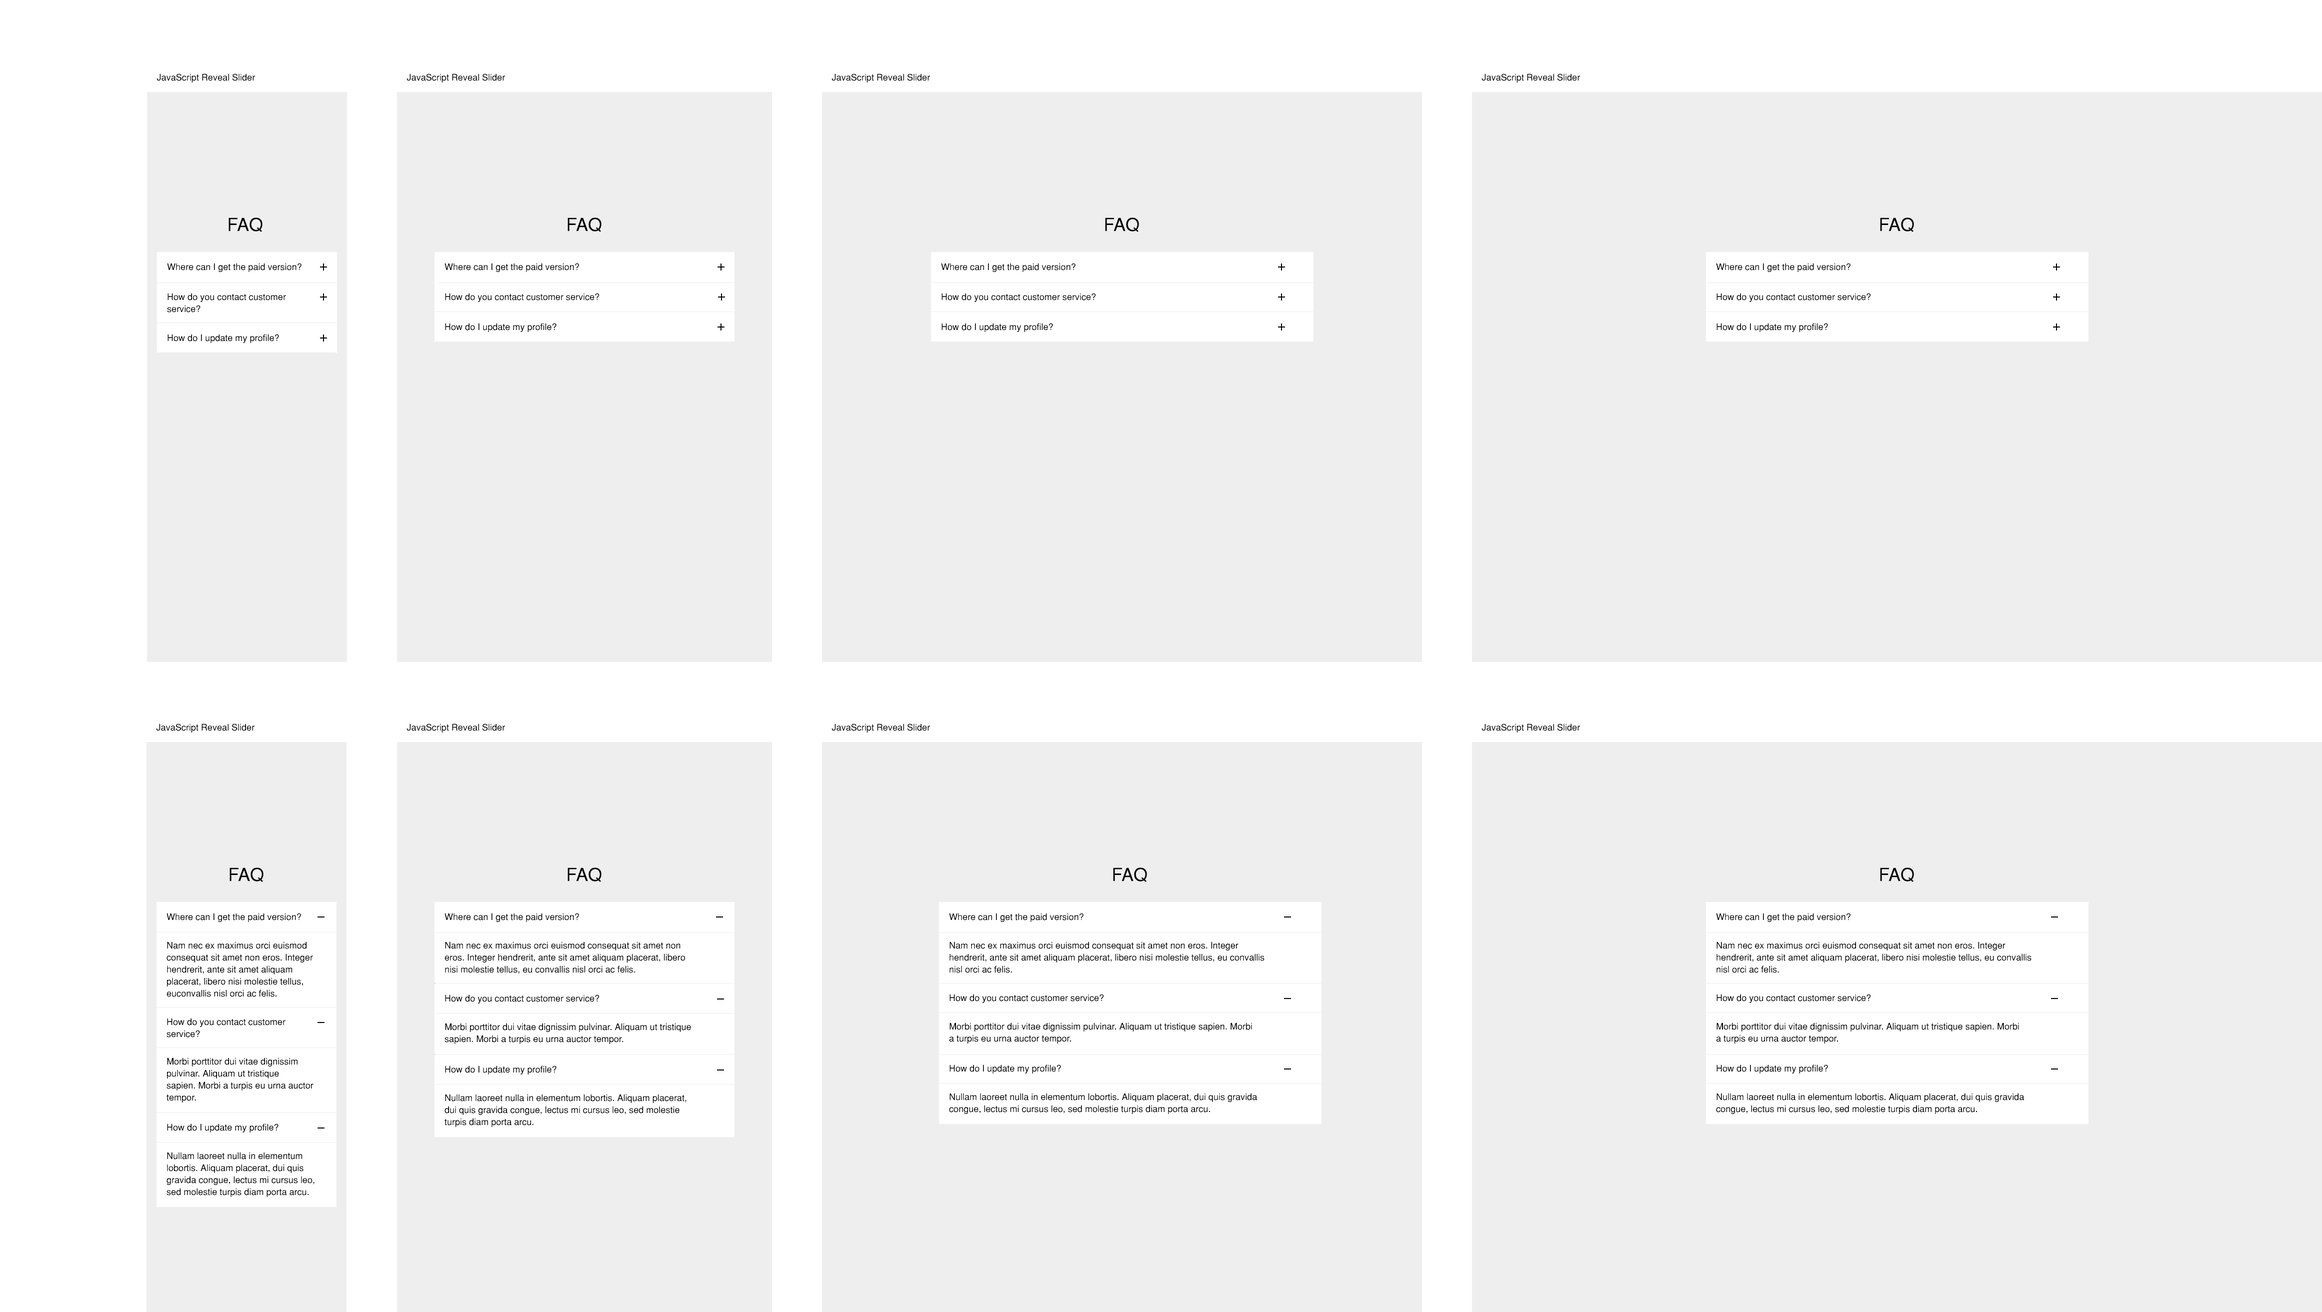
<style>
.page{position:relative;width:2322px;height:1312px;background:#eeeeee}
.page>*{position:absolute;margin:0}
.t1{font:9px "Helvetica-Normal";color:#000000}
.t2{font:18px "Helvetica-Normal";color:#000000}
.t3{font:9px/12px "Helvetica-Normal";color:#000000}
</style>
<div class="page">
<p class="t1" style="left:156px;top:74px;width:99px;height:8px">JavaScript Reveal Slider</p>
<p class="t1" style="left:406px;top:74px;width:99px;height:8px">JavaScript Reveal Slider</p>
<p class="t1" style="left:832px;top:74px;width:98px;height:8px">JavaScript Reveal Slider</p>
<p class="t1" style="left:1482px;top:74px;width:98px;height:8px">JavaScript Reveal Slider</p>
<p class="t2" style="left:228px;top:218px;width:34px;height:14px">FAQ</p>
<p class="t2" style="left:568px;top:218px;width:34px;height:14px">FAQ</p>
<p class="t2" style="left:1105px;top:218px;width:34px;height:14px">FAQ</p>
<p class="t2" style="left:1880px;top:218px;width:34px;height:14px">FAQ</p>
<p class="t1" style="left:167px;top:263px;width:135px;height:9px">Where can I get the paid version?</p>
<p class="t1" style="left:444px;top:263px;width:135px;height:9px">Where can I get the paid version?</p>
<p class="t1" style="left:941px;top:263px;width:135px;height:9px">Where can I get the paid version?</p>
<p class="t1" style="left:1716px;top:263px;width:134px;height:9px">Where can I get the paid version?</p>
<p class="t3" style="left:167px;top:293px;width:119px;height:19px">How do you contact customer <br>service?</p>
<p class="t1" style="left:445px;top:293px;width:155px;height:9px">How do you contact customer service?</p>
<p class="t1" style="left:942px;top:293px;width:154px;height:9px">How do you contact customer service?</p>
<p class="t1" style="left:1716px;top:293px;width:155px;height:9px">How do you contact customer service?</p>
<p class="t1" style="left:445px;top:323px;width:111px;height:9px">How do I update my profile?</p>
<p class="t1" style="left:942px;top:323px;width:111px;height:9px">How do I update my profile?</p>
<p class="t1" style="left:1716px;top:323px;width:112px;height:9px">How do I update my profile?</p>
<p class="t1" style="left:168px;top:334px;width:111px;height:9px">How do I update my profile?</p>
<p class="t1" style="left:156px;top:724px;width:98px;height:8px">JavaScript Reveal Slider</p>
<p class="t1" style="left:406px;top:724px;width:99px;height:8px">JavaScript Reveal Slider</p>
<p class="t1" style="left:832px;top:724px;width:98px;height:8px">JavaScript Reveal Slider</p>
<p class="t1" style="left:1482px;top:724px;width:98px;height:8px">JavaScript Reveal Slider</p>
<p class="t2" style="left:230px;top:868px;width:34px;height:14px">FAQ</p>
<p class="t2" style="left:568px;top:868px;width:34px;height:14px">FAQ</p>
<p class="t2" style="left:1113px;top:868px;width:34px;height:14px">FAQ</p>
<p class="t2" style="left:1880px;top:868px;width:34px;height:14px">FAQ</p>
<p class="t1" style="left:166px;top:913px;width:135px;height:9px">Where can I get the paid version?</p>
<p class="t1" style="left:444px;top:913px;width:135px;height:9px">Where can I get the paid version?</p>
<p class="t1" style="left:949px;top:913px;width:135px;height:9px">Where can I get the paid version?</p>
<p class="t1" style="left:1716px;top:913px;width:134px;height:9px">Where can I get the paid version?</p>
<p class="t3" style="left:166px;top:942px;width:147px;height:55px">Nam nec ex maximus orci euismod<br>consequat sit amet non eros. Integer<br>hendrerit, ante sit amet aliquam<br>placerat, libero nisi molestie tellus, <br>euconvallis nisl orci ac felis.</p>
<p class="t3" style="left:444px;top:942px;width:241px;height:32px">Nam nec ex maximus orci euismod consequat sit amet non eros. Integer hendrerit, ante sit amet aliquam placerat, libero nisi molestie tellus, eu convallis nisl orci ac felis.</p>
<p class="t3" style="left:950px;top:942px;width:314px;height:31px">Nam nec ex maximus orci euismod consequat sit amet non eros. Integer<br>hendrerit, ante sit amet aliquam placerat, libero nisi molestie tellus, eu convallis<br>nisl orci ac felis.</p>
<p class="t3" style="left:1716px;top:942px;width:316px;height:31px">Nam nec ex maximus orci euismod consequat sit amet non eros. Integer<br>hendrerit, ante sit amet aliquam placerat, libero nisi molestie tellus, eu convallis<br>nisl orci ac felis.</p>
<p class="t1" style="left:445px;top:994px;width:155px;height:10px">How do you contact customer service?</p>
<p class="t1" style="left:950px;top:994px;width:154px;height:9px">How do you contact customer service?</p>
<p class="t1" style="left:1716px;top:994px;width:155px;height:9px">How do you contact customer service?</p>
<p class="t3" style="left:166px;top:1018px;width:120px;height:20px">How do you contact customer <br>service?</p>
<p class="t3" style="left:444px;top:1023px;width:247px;height:21px">Morbi porttitor dui vitae dignissim pulvinar. Aliquam ut tristique<br>sapien. Morbi a turpis eu urna auctor tempor.</p>
<p class="t3" style="left:949px;top:1022px;width:303px;height:22px">Morbi porttitor dui vitae dignissim pulvinar. Aliquam ut tristique sapien. Morbi <br>a turpis eu urna auctor tempor.</p>
<p class="t3" style="left:1716px;top:1022px;width:303px;height:22px">Morbi porttitor dui vitae dignissim pulvinar. Aliquam ut tristique sapien. Morbi <br>a turpis eu urna auctor tempor.</p>
<p class="t3" style="left:166px;top:1058px;width:148px;height:44px">Morbi porttitor dui vitae dignissim<br>pulvinar. Aliquam ut tristique<br>sapien. Morbi a turpis eu urna auctor<br>tempor.</p>
<p class="t1" style="left:445px;top:1066px;width:111px;height:8px">How do I update my profile?</p>
<p class="t1" style="left:950px;top:1064px;width:111px;height:10px">How do I update my profile?</p>
<p class="t1" style="left:1716px;top:1064px;width:112px;height:10px">How do I update my profile?</p>
<p class="t3" style="left:444px;top:1094px;width:242px;height:33px">Nullam laoreet nulla in elementum lobortis. Aliquam placerat,<br>dui quis gravida congue, lectus mi cursus leo, sed molestie<br>turpis diam porta arcu.</p>
<p class="t3" style="left:949px;top:1093px;width:308px;height:21px">Nullam laoreet nulla in elementum lobortis. Aliquam placerat, dui quis gravida <br>congue, lectus mi cursus leo, sed molestie turpis diam porta arcu.</p>
<p class="t3" style="left:1716px;top:1093px;width:308px;height:21px">Nullam laoreet nulla in elementum lobortis. Aliquam placerat, dui quis gravida <br>congue, lectus mi cursus leo, sed molestie turpis diam porta arcu.</p>
<p class="t1" style="left:167px;top:1124px;width:111px;height:8px">How do I update my profile?</p>
<p class="t3" style="left:166px;top:1152px;width:148px;height:45px">Nullam laoreet nulla in elementum<br>lobortis. Aliquam placerat, dui quis<br>gravida congue, lectus mi cursus leo,<br>sed molestie turpis diam porta arcu.</p>
</div>
